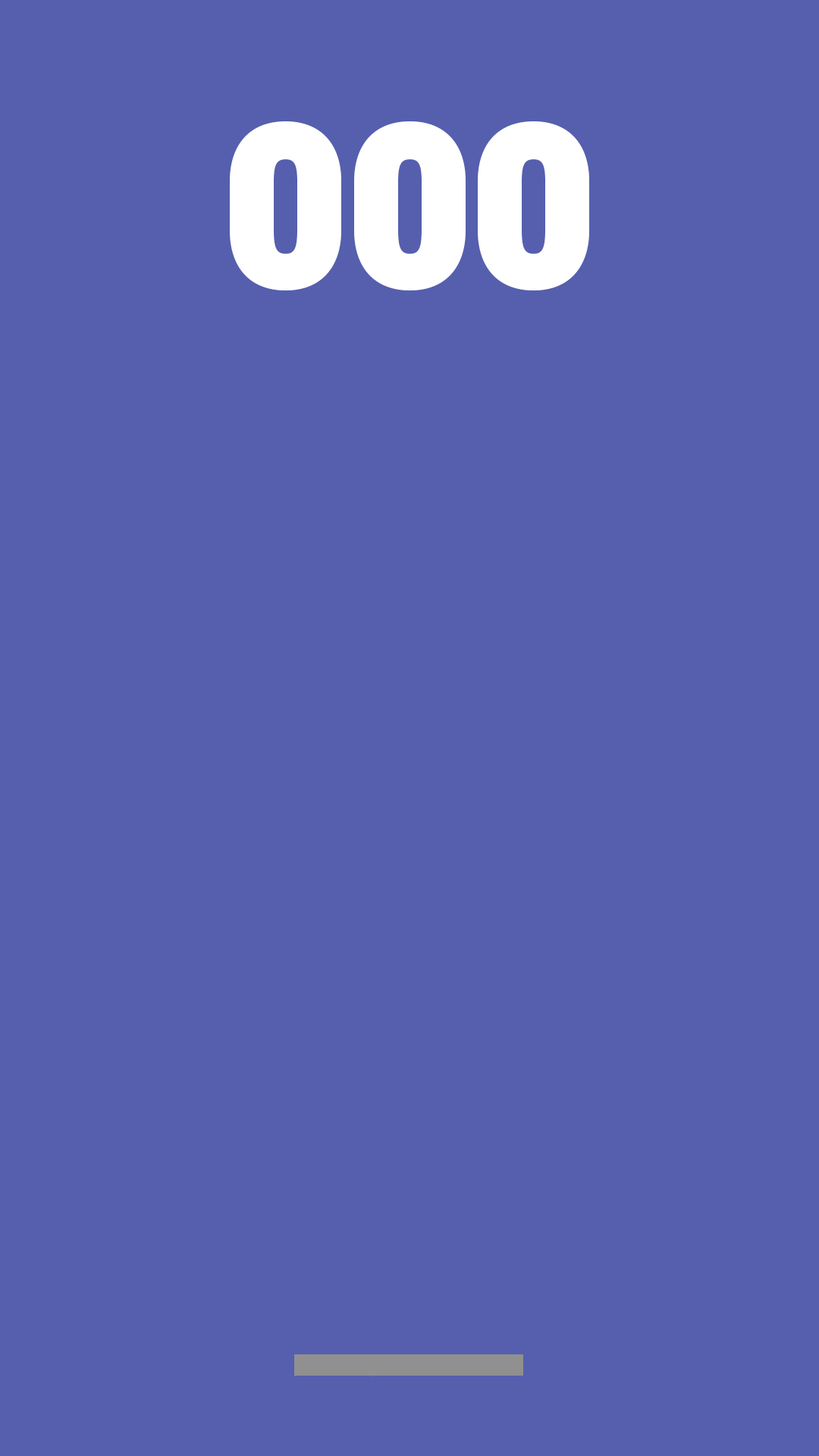
<style>
.page{position:relative;width:819px;height:1456px;background:#555fae}
.page>*{position:absolute;margin:0}
.t1{font:227.5px "GoodPro-Ultra";color:#ffffff}
</style>
<div class="page">
<p class="t1" style="left:230px;top:121px;width:359px;height:169px">000</p>
</div>
